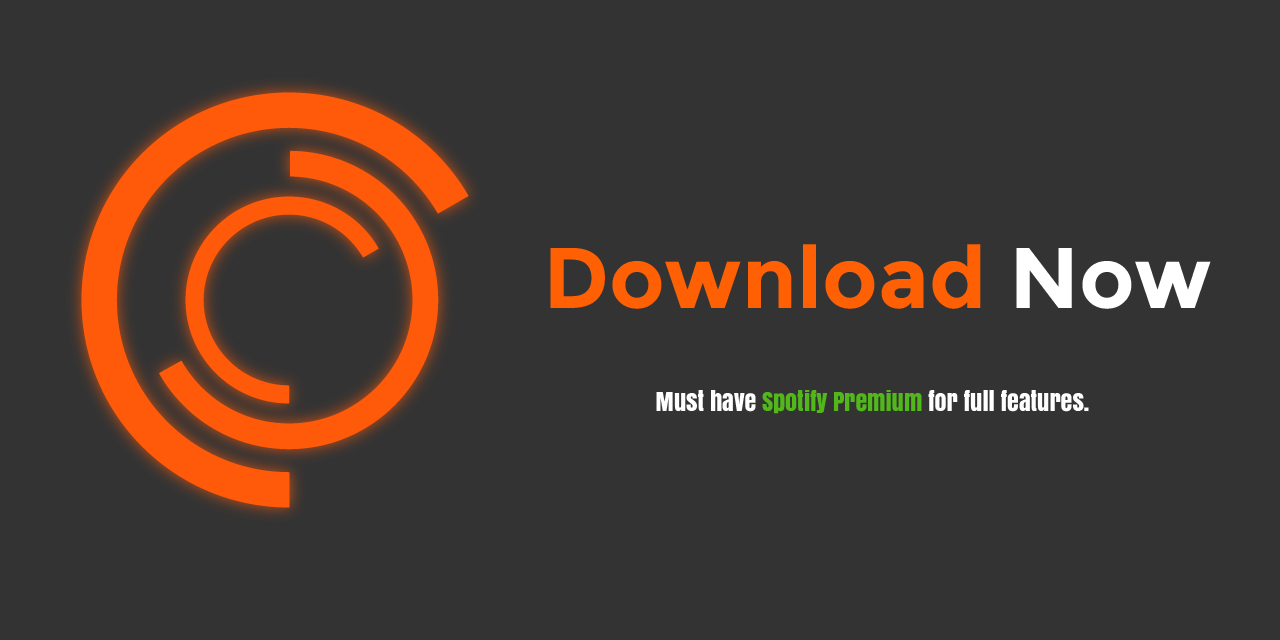
<style>
.page{position:relative;width:1280px;height:640px;background:#333333}
.page>*{position:absolute;margin:0}
.t1{font:86px "Montserrat-Bold";color:#ff6004}
.t2{font:86px "Montserrat-Bold";color:#ffffff}
.t3{font:24px "Anton";color:#ffffff}
.t4{font:24px "Anton";color:#51b71a}
</style>
<div class="page">
<p class="t1" style="left:550px;top:244px;width:661px;height:65px">Download <span class="t2">Now</span></p>
<p class="t3" style="left:656px;top:390px;width:433px;height:24px">Must have <span class="t4">Spotify Premium</span> for full features.</p>
</div>
